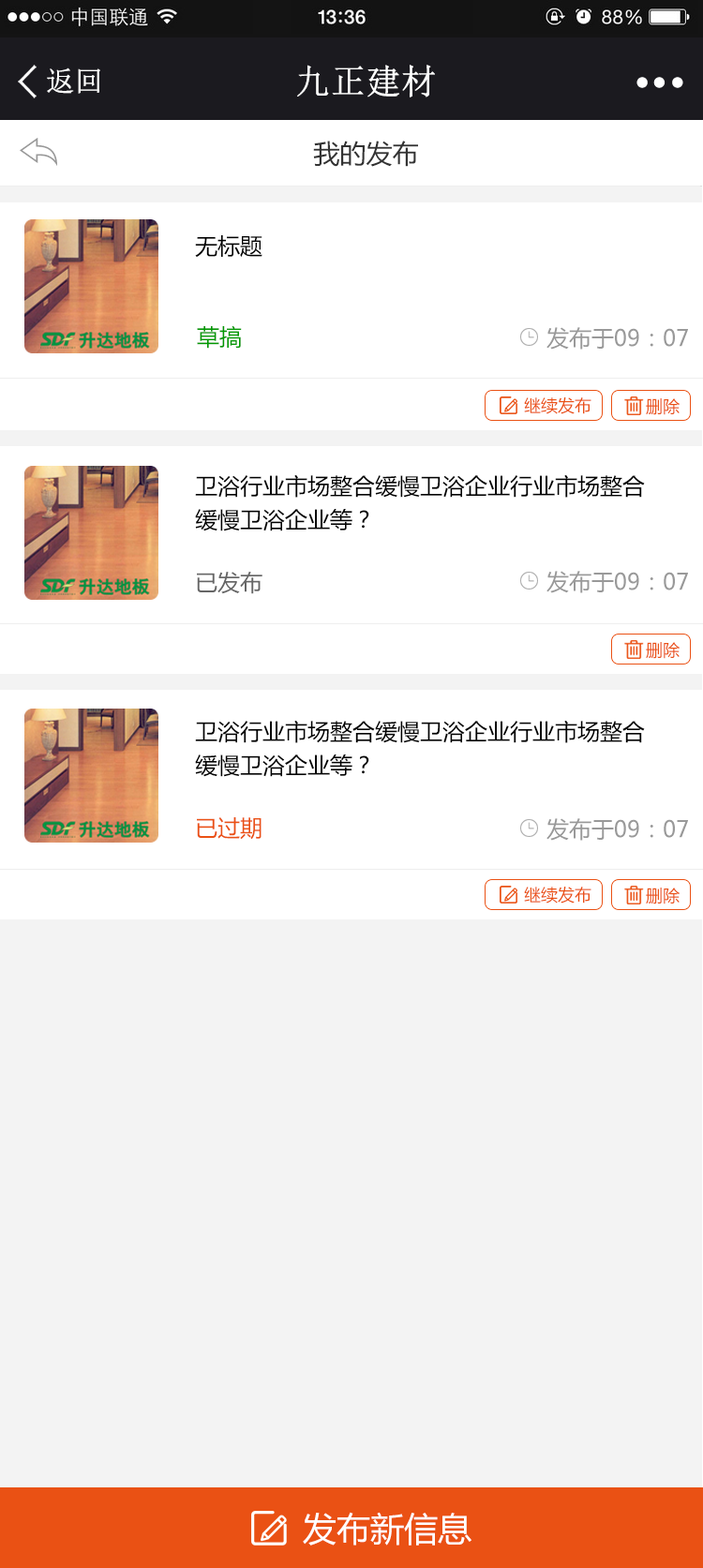
<style>
.page{position:relative;width:703px;height:1568px;background:#ffffff}
.page>*{position:absolute;margin:0}
.t1{font:34.4px "NSimSun";color:#ffffff;font-weight:bold}
.t2{font:28.1px "NSimSun";color:#ffffff;font-weight:bold}
.t3{font:26.2px "MicrosoftYaHei";color:#333333}
.t4{font:26.2px "MicrosoftYaHei";color:#333333;font-weight:bold}
.t5{font:22.5px "MicrosoftYaHei";color:#000000}
.t6{font:22.5px "MicrosoftYaHei";color:#009900}
.t7{font:22.5px "MicrosoftYaHei";color:#999999}
.t8{font:16.9px "MicrosoftYaHei";color:#ea5114}
.t9{font:22.5px/33.7px "MicrosoftYaHei";color:#000000}
.t10{font:22.5px "MicrosoftYaHei";color:#666666}
.t11{font:22.5px "MicrosoftYaHei";color:#ea5114}
.t12{font:33.7px "MicrosoftYaHei";color:#ffffff}
</style>
<div class="page">
<p class="t1" style="left:297px;top:65px;width:138px;height:32px">九正建材</p>
<p class="t2" style="left:47px;top:67px;width:53px;height:27px">返回</p>
<p class="t3" style="left:313px;top:141px;width:105px;height:26px"><span class="t4"><br></span>我的发布</p>
<p class="t5" style="left:195px;top:235px;width:67px;height:23px">无标题</p>
<p class="t6" style="left:197px;top:325px;width:45px;height:24px">草搞</p>
<p class="t7" style="left:546px;top:327px;width:142px;height:23px">发布于09：07</p>
<p class="t8" style="left:524px;top:397px;width:67px;height:17px">继续发布</p>
<p class="t8" style="left:646px;top:398px;width:33px;height:17px">删除</p>
<p class="t9" style="left:195px;top:474px;width:450px;height:57px">卫浴行业市场整合缓慢卫浴企业行业市场整合<br>缓慢卫浴企业等？</p>
<p class="t10" style="left:197px;top:571px;width:65px;height:23px">已发布</p>
<p class="t7" style="left:546px;top:571px;width:142px;height:22px">发布于09：07</p>
<p class="t8" style="left:646px;top:642px;width:33px;height:17px">删除</p>
<p class="t9" style="left:195px;top:720px;width:450px;height:57px">卫浴行业市场整合缓慢卫浴企业行业市场整合<br>缓慢卫浴企业等？</p>
<p class="t11" style="left:197px;top:817px;width:64px;height:23px">已过期</p>
<p class="t7" style="left:546px;top:818px;width:142px;height:23px">发布于09：07</p>
<p class="t8" style="left:524px;top:887px;width:67px;height:16px">继续发布</p>
<p class="t8" style="left:646px;top:888px;width:33px;height:16px">删除</p>
<p class="t12" style="left:303px;top:1512px;width:168px;height:34px">发布新信息</p>
</div>
